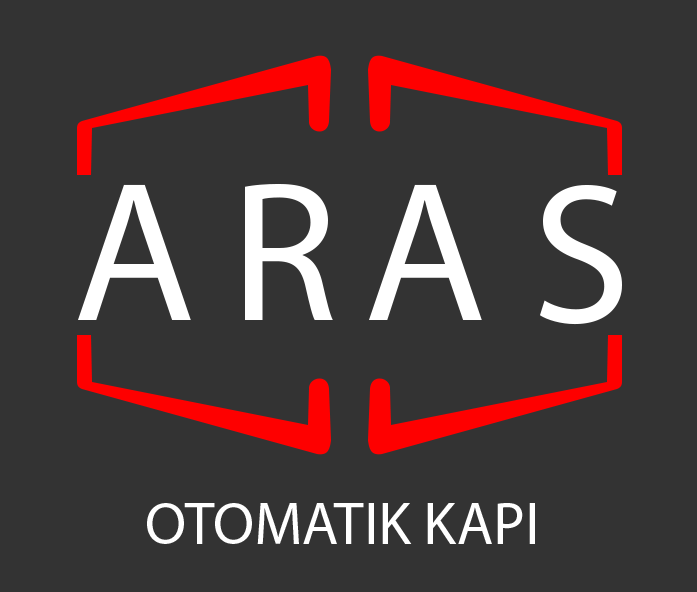
<style>
.page{position:relative;width:697px;height:592px;background:#333333}
.page>*{position:absolute;margin:0}
.t1{font:200.4px "MyriadHebrew-Regular";color:#ffffff}
.t2{font:60px "MyriadHebrew-Regular";color:#ffffff}
</style>
<div class="page">
<p class="t1" style="left:78px;top:184px;width:113px;height:136px">A</p>
<p class="t1" style="left:245px;top:183px;width:88px;height:137px">R</p>
<p class="t1" style="left:369px;top:184px;width:113px;height:136px">A</p>
<p class="t1" style="left:540px;top:185px;width:82px;height:140px">S</p>
<p class="t2" style="left:147px;top:503px;width:388px;height:41px">OTOMATIK KAPI</p>
</div>
